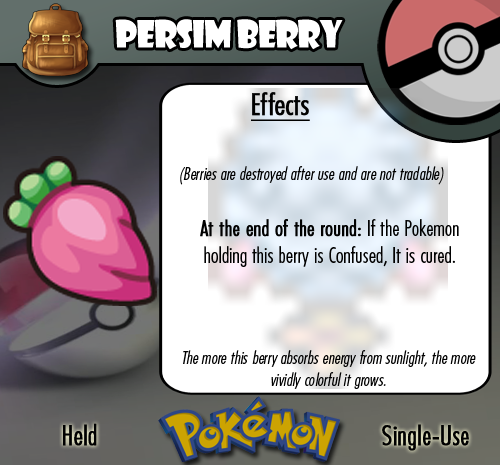
<style>
.page{position:relative;width:500px;height:465px}
.page>*{position:absolute;margin:0}
.t1{font:36.7px "ShowcardGothic-Reg";letter-spacing:-0.025em;color:#ffffff;scale:0.91 1}
.t2{font:22.2px "FuturaCondensedBQ-Light";color:#010101}
.t3{font:27.8px "FuturaCondensedBQ-Light";color:#010101;font-weight:bold}
.t4{font:30.6px "FuturaCondensedBQ-Light";color:#010101;font-weight:bold;text-decoration:underline}
.t5{font:18.1px "FuturaCondensedBQ-Light";color:#010101;font-style:italic}
.t6{font:22.2px "FuturaCondensedBQ-Light";color:#010101;font-weight:bold}
</style>
<div class="page">
<p class="t1" style="left:115px;top:19px;width:228px;height:31px">Persim Berry</p>
<p class="t2" style="left:180px;top:92px;width:279px;height:175px"><span class="t3">  </span><span class="t4">Effects<br><br><br></span><span class="t5">(Berries are destroyed after use and are not tradable)<br><br><br><br></span><span class="t6">At the end of the round:</span> If the Pokemon holding this berry is Confused, It is cured.</p>
<p class="t5" style="left:183px;top:350px;width:293px;height:39px;text-align:center">The more this berry absorbs energy from sunlight, the more vividly colorful it grows.</p>
<p class="t3" style="left:63px;top:423px;width:34px;height:23px">Held</p>
<p class="t3" style="left:382px;top:424px;width:87px;height:27px">Single-Use</p>
</div>
